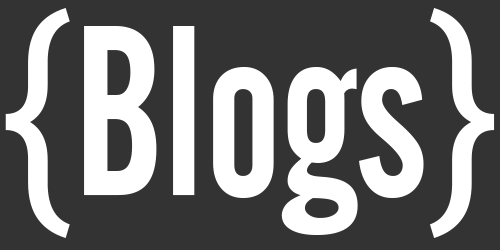
<style>
.page{position:relative;width:500px;height:250px;background:#333333}
.page>*{position:absolute;margin:0}
.t1{font:239.7px "AlternateGothicNo2BT-Regular";color:#ffffff;scale:0.9 1}
.t2{font:239.7px "Roboto-Regular";color:#ffffff;scale:0.9 1}
</style>
<div class="page">
<p class="t1" style="left:5px;top:8px;width:490px;height:230px"><span class="t2">{</span>Blogs<span class="t2">}</span></p>
</div>
